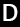
<style>
.page{position:relative;width:20px;height:27px;background:#000000}
.page>*{position:absolute;margin:0}
.t1{font:27px "LucidaConsole";color:#ffffff}
</style>
<div class="page">
<p class="t1" style="left:3px;top:4px;width:15px;height:17px">D</p>
</div>
